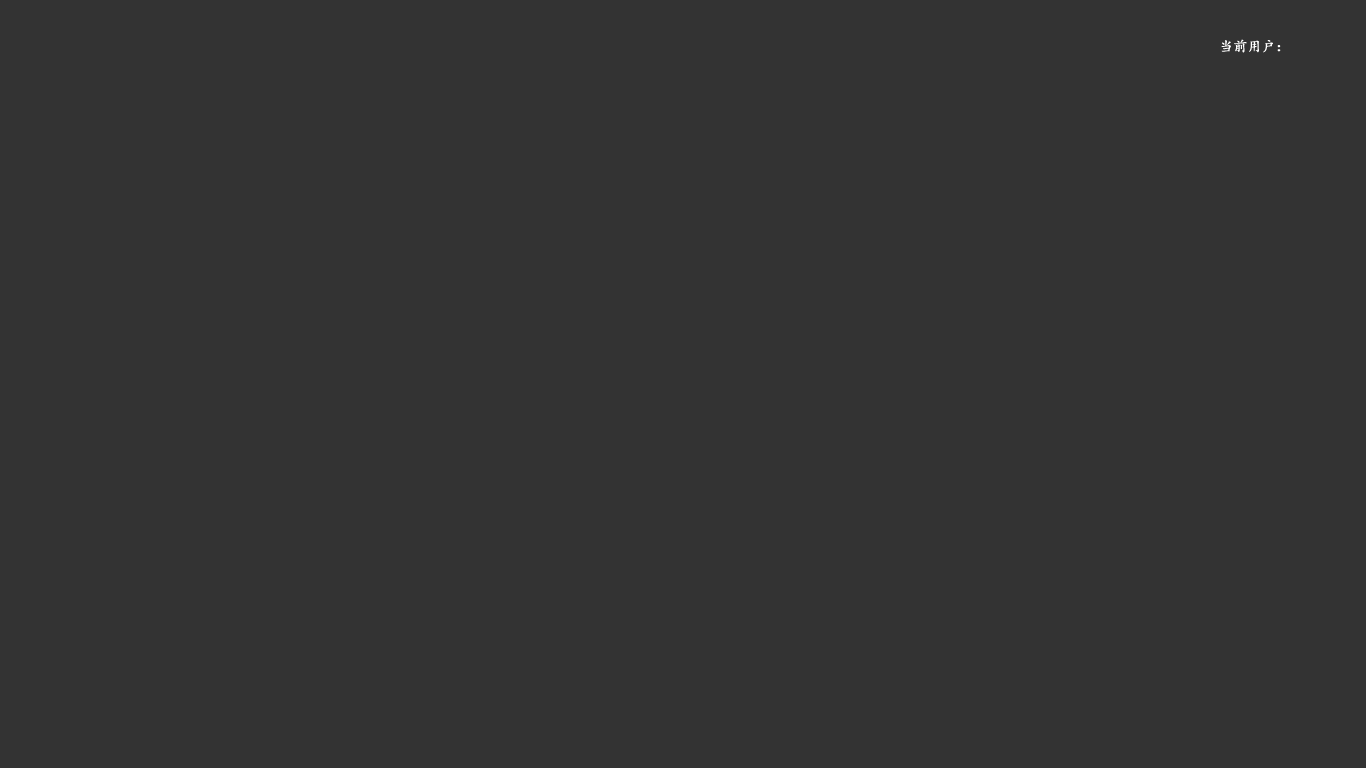
<style>
.page{position:relative;width:1366px;height:768px;background:#333333}
.page>*{position:absolute;margin:0}
.t1{font:14px "¿¬Ìå";color:#ffffff;font-weight:bold}
</style>
<div class="page">
<p class="t1" style="left:1221px;top:39px;width:60px;height:14px">当前用户：</p>
</div>
